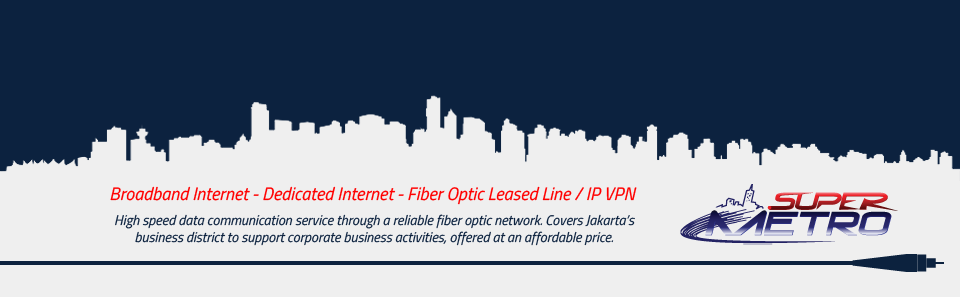
<style>
.page{position:relative;width:960px;height:297px;background:#0c223f}
.page>*{position:absolute;margin:0}
.t1{font:18px "TitilliumWeb-Italic";color:#ff0000}
.t2{font:14px "TitilliumWeb-Italic";color:#0c223f}
</style>
<div class="page">
<p class="t1" style="left:110px;top:186px;width:527px;height:19px">Broadband Internet - Dedicated Internet - Fiber Optic Leased Line / IP VPN</p>
<p class="t2" style="left:115px;top:214px;width:520px;height:32px;text-align:center">High speed data communication service through a reliable fiber optic network. Covers Jakarta’s business district to support corporate business activities, offered at an affordable price.</p>
</div>
